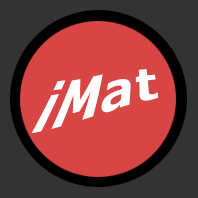
<style>
.page{position:relative;width:198px;height:198px;background:#d74545}
.page>*{position:absolute;margin:0}
.t1{font:53.3px "Verdana-BoldItalic";color:#fffefe}
</style>
<div class="page">
<p class="t1" style="left:31px;top:69px;width:128px;height:65px">iMat</p>
</div>
